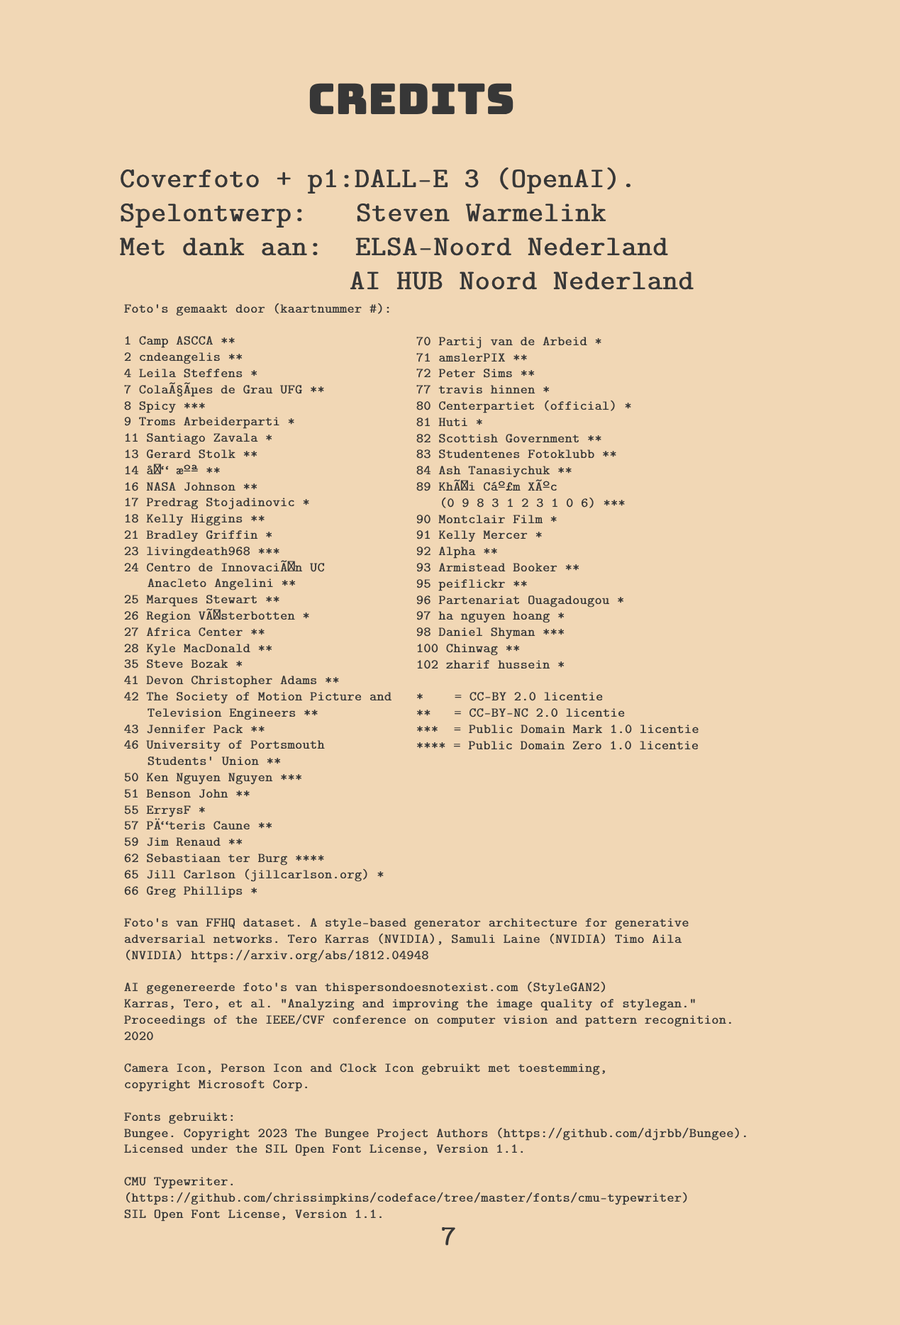
<style>
.page{position:relative;width:900px;height:1325px;background:#f1d7b5}
.page>*{position:absolute;margin:0}
.t1{font:42.5px "Bungee-Regular";color:#373737;font-weight:bold}
.t2{font:28.4px "CMUTypewriter-Regular";color:#373737;font-weight:bold}
.t3{font:13.5px "CMUTypewriter-Regular";color:#373737;font-weight:bold}
</style>
<div class="page">
<p class="t1" style="left:309px;top:83px;width:204px;height:31px">Credits</p>
<p class="t2" style="left:120px;top:167px;width:573px;height:123px">Coverfoto + p1:DALL-E 3 (OpenAI).<br>Spelontwerp:   Steven Warmelink<br>Met dank aan:  ELSA-Noord Nederland<br>              AI HUB Noord Nederland</p>
<p class="t3" style="left:124px;top:303px;width:622px;height:919px">Foto's gemaakt door (kaartnummer #):<br><br>1 Camp ASCCA **<br>2 cndeangelis **<br>4 Leila Steffens *<br>7 ColaÃ§Ãµes de Grau UFG **<br>8 Spicy ***<br>9 Troms Arbeiderparti *<br>11 Santiago Zavala * <br>13 Gerard Stolk **<br>14 å“ æºª **<br>16 NASA Johnson **<br>17 Predrag Stojadinovic *<br>18 Kelly Higgins **<br>21 Bradley Griffin * <br>23 livingdeath968 ***<br>24 Centro de InnovaciÃ³n UC <br>   Anacleto Angelini **<br>25 Marques Stewart **<br>26 Region VÃ¤sterbotten *<br>27 Africa Center **<br>28 Kyle MacDonald **<br>35 Steve Bozak *<br>41 Devon Christopher Adams **<br>42 The Society of Motion Picture and <br>   Television Engineers **<br>43 Jennifer Pack **<br>46 University of Portsmouth <br>   Students' Union **<br>50 Ken Nguyen Nguyen ***<br>51 Benson John **<br>55 ErrysF *<br>57 PÄ“teris Caune **<br>59 Jim Renaud **<br>62 Sebastiaan ter Burg ****<br>65 Jill Carlson (jillcarlson.org) *<br>66 Greg Phillips * <br><br>Foto's van FFHQ dataset. A style-based generator architecture for generative <br>adversarial networks. Tero Karras (NVIDIA), Samuli Laine (NVIDIA) Timo Aila <br>(NVIDIA) https://arxiv.org/abs/1812.04948 <br><br>AI gegenereerde foto's van thispersondoesnotexist.com (StyleGAN2)<br>Karras, Tero, et al. "Analyzing and improving the image quality of stylegan." <br>Proceedings of the IEEE/CVF conference on computer vision and pattern recognition. <br>2020<br><br>Camera Icon, Person Icon and Clock Icon gebruikt met toestemming,<br>copyright Microsoft Corp.<br><br>Fonts gebruikt:<br>Bungee. Copyright 2023 The Bungee Project Authors (https://github.com/djrbb/Bungee).<br>Licensed under the SIL Open Font License, Version 1.1.<br><br>CMU Typewriter. <br>(https://github.com/chrissimpkins/codeface/tree/master/fonts/cmu-typewriter) <br>SIL Open Font License, Version 1.1.</p>
<p class="t3" style="left:416px;top:337px;width:282px;height:413px">70 Partij van de Arbeid *<br>71 amslerPIX **<br>72 Peter Sims **<br>77 travis hinnen *<br>80 Centerpartiet (official) *<br>81 Huti *<br>82 Scottish Government **<br>83 Studentenes Fotoklubb **<br>84 Ash Tanasiychuk ** <br>89 KhÃ³i Cáº£m XÃºc <br>   (0 9 8 3 1 2 3 1 0 6) ***<br>90 Montclair Film *<br>91 Kelly Mercer *<br>92 Alpha **<br>93 Armistead Booker **<br>95 peiflickr **<br>96 Partenariat Ouagadougou * <br>97 ha nguyen hoang * <br>98 Daniel Shyman ***<br>100 Chinwag **<br>102 zharif hussein *<br><br>*    = CC-BY 2.0 licentie<br>**   = CC-BY-NC 2.0 licentie<br>***  = Public Domain Mark 1.0 licentie<br>**** = Public Domain Zero 1.0 licentie</p>
<p class="t2" style="left:442px;top:1227px;width:13px;height:19px">7</p>
</div>
